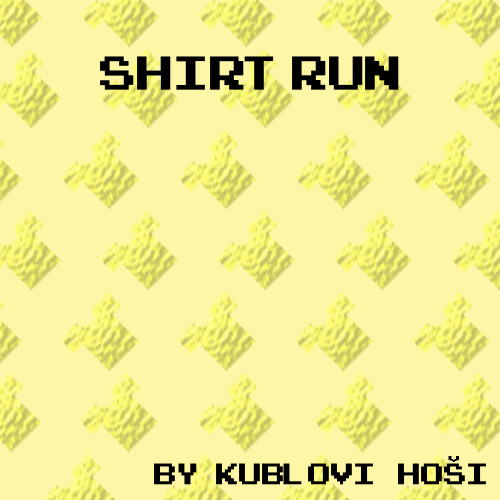
<style>
.page{position:relative;width:500px;height:500px;background:#fcf6a6}
.page>*{position:absolute;margin:0}
.t1{font:66.7px "ArcadeClassic";color:#000000}
.t2{font:12.5px "ArcadeClassic";color:#000000;scale:1.69 1}
.t3{font:41.7px "ArcadeClassic";color:#000000}
</style>
<div class="page">
<p class="t1" style="left:100px;top:56px;width:299px;height:34px">Shirt Run</p>
<p class="t2" style="left:448px;top:456px;width:11px;height:6px">v</p>
<p class="t3" style="left:154px;top:463px;width:332px;height:22px">By   kublovi    hosi</p>
</div>
